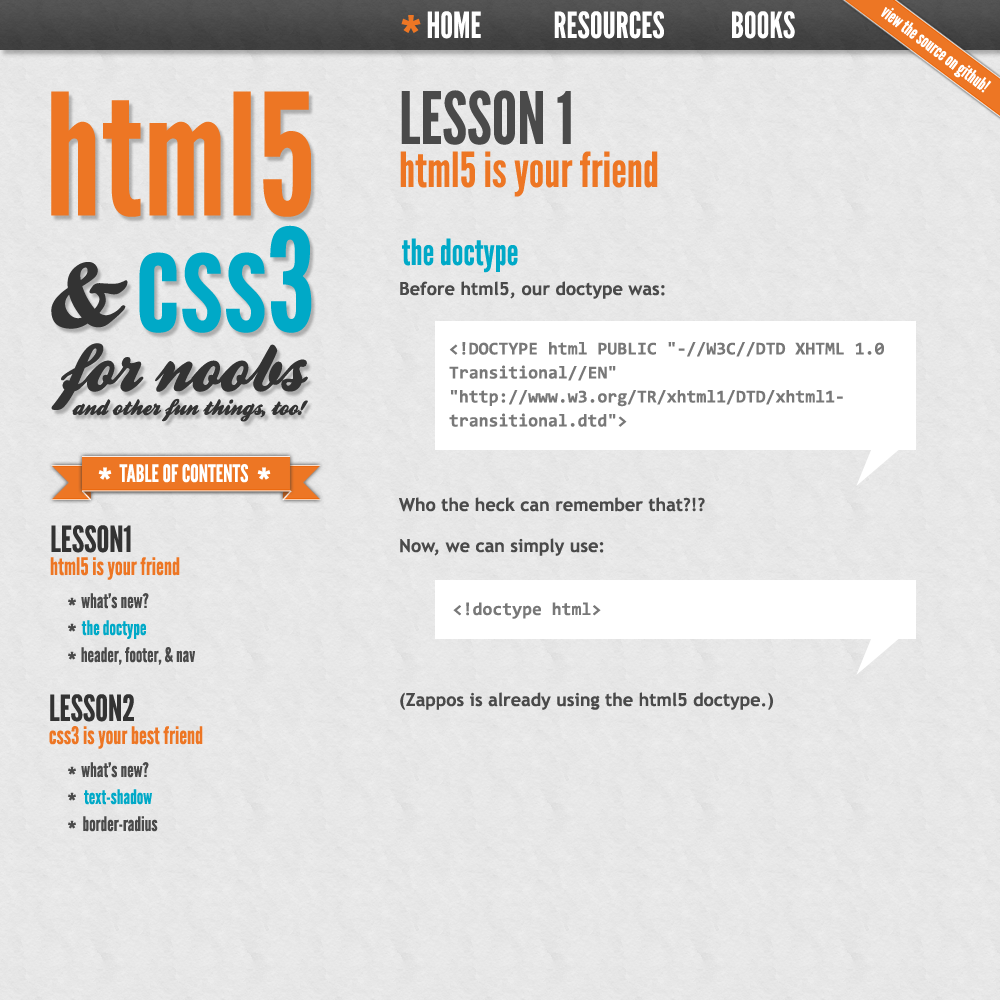
<style>
.page{position:relative;width:1000px;height:1000px}
.page>*{position:absolute;margin:0}
.t1{font:72px "LeagueGothic";color:#ed7624}
.t2{font:36px "LeagueGothic";color:#ffffff}
.t3{font:18px "LeagueGothic";color:#ffffff}
.t4{font:168.5px "LeagueGothic";color:#ed7624}
.t5{font:72px "LeagueGothic";color:#4a4a4a}
.t6{font:48px "LeagueGothic";color:#ed7624}
.t7{font:142px "LeagueGothic";color:#00a9c7}
.t8{font:36px "LeagueGothic";color:#00a9c7}
.t9{font:96px "BallparkWeiner";color:#333333}
.t10{font:18px "TrebuchetMS-Bold";color:#4a4a4a}
.t11{font:18px/24px "Consolas-Bold";color:#787878}
.t12{font:72px "BallparkWeiner";color:#333333}
.t13{font:24px "BallparkWeiner";color:#333333}
.t14{font:48px "LeagueGothic";color:#ffffff}
.t15{font:24px "LeagueGothic";color:#ffffff}
.t16{font:36px "LeagueGothic";color:#333333}
.t17{font:24px "LeagueGothic";color:#ed7624}
.t18{font:20px "LeagueGothic";color:#4a4a4a}
.t19{font:30px "LeagueGothic";color:#4a4a4a}
.t20{font:18px "Consolas-Bold";color:#787878}
.t21{font:20px "LeagueGothic";color:#00a9c7}
</style>
<div class="page">
<p class="t1" style="left:401px;top:15px;width:20px;height:18px">*</p>
<p class="t2" style="left:427px;top:11px;width:54px;height:28px">HOME</p>
<p class="t2" style="left:554px;top:11px;width:110px;height:28px">RESOURCES</p>
<p class="t2" style="left:732px;top:11px;width:63px;height:28px">BOOKS</p>
<p class="t3" style="left:881px;top:7px;width:111px;height:86px;rotate:37deg">view the source on github!</p>
<p class="t4" style="left:51px;top:91px;width:260px;height:126px">html5</p>
<p class="t5" style="left:401px;top:90px;width:170px;height:55px">LESSON 1</p>
<p class="t6" style="left:400px;top:151px;width:258px;height:46px">html5 is your friend</p>
<p class="t7" style="left:139px;top:225px;width:173px;height:108px">css3</p>
<p class="t8" style="left:402px;top:238px;width:116px;height:35px">the doctype</p>
<p class="t9" style="left:51px;top:262px;width:77px;height:67px">&amp;</p>
<p class="t10" style="left:400px;top:281px;width:265px;height:18px">Before html5, our doctype was:</p>
<p class="t11" style="left:449px;top:342px;width:435px;height:85px">&lt;!DOCTYPE html PUBLIC "-//W3C//DTD XHTML 1.0 Transitional//EN"<br>"http://www.w3.org/TR/xhtml1/DTD/xhtml1-transitional.dtd"&gt;</p>
<p class="t12" style="left:51px;top:343px;width:257px;height:67px">for noobs</p>
<p class="t13" style="left:72px;top:398px;width:236px;height:24px">and other fun things, too!</p>
<p class="t14" style="left:98px;top:467px;width:14px;height:13px">*</p>
<p class="t15" style="left:119px;top:464px;width:129px;height:19px">TABLE OF CONTENTS</p>
<p class="t14" style="left:257px;top:467px;width:14px;height:13px">*</p>
<p class="t10" style="left:399px;top:497px;width:306px;height:15px">Who the heck can remember that?!?</p>
<p class="t16" style="left:51px;top:525px;width:80px;height:28px">LESSON1</p>
<p class="t10" style="left:400px;top:538px;width:204px;height:18px">Now, we can simply use:</p>
<p class="t17" style="left:50px;top:557px;width:130px;height:23px">html5 is your friend</p>
<p class="t18" style="left:81px;top:593px;width:68px;height:16px">what’s new?</p>
<p class="t19" style="left:68px;top:597px;width:8px;height:9px">*</p>
<p class="t20" style="left:453px;top:602px;width:148px;height:17px">&lt;!doctype html&gt;</p>
<p class="t19" style="left:68px;top:623px;width:8px;height:9px">*</p>
<p class="t21" style="left:81px;top:620px;width:65px;height:19px">the doctype</p>
<p class="t19" style="left:68px;top:651px;width:8px;height:9px">*</p>
<p class="t18" style="left:81px;top:647px;width:114px;height:18px">header, footer, &amp; nav</p>
<p class="t16" style="left:50px;top:694px;width:84px;height:28px">LESSON2</p>
<p class="t10" style="left:400px;top:692px;width:373px;height:18px">(Zappos is already using the html5 doctype.)</p>
<p class="t17" style="left:49px;top:726px;width:154px;height:23px">css3 is your best friend</p>
<p class="t19" style="left:68px;top:766px;width:8px;height:9px">*</p>
<p class="t18" style="left:81px;top:762px;width:68px;height:16px">what’s new?</p>
<p class="t19" style="left:68px;top:792px;width:8px;height:9px">*</p>
<p class="t21" style="left:84px;top:789px;width:68px;height:16px">text-shadow</p>
<p class="t19" style="left:68px;top:820px;width:8px;height:9px">*</p>
<p class="t18" style="left:83px;top:816px;width:75px;height:16px">border-radius</p>
</div>
